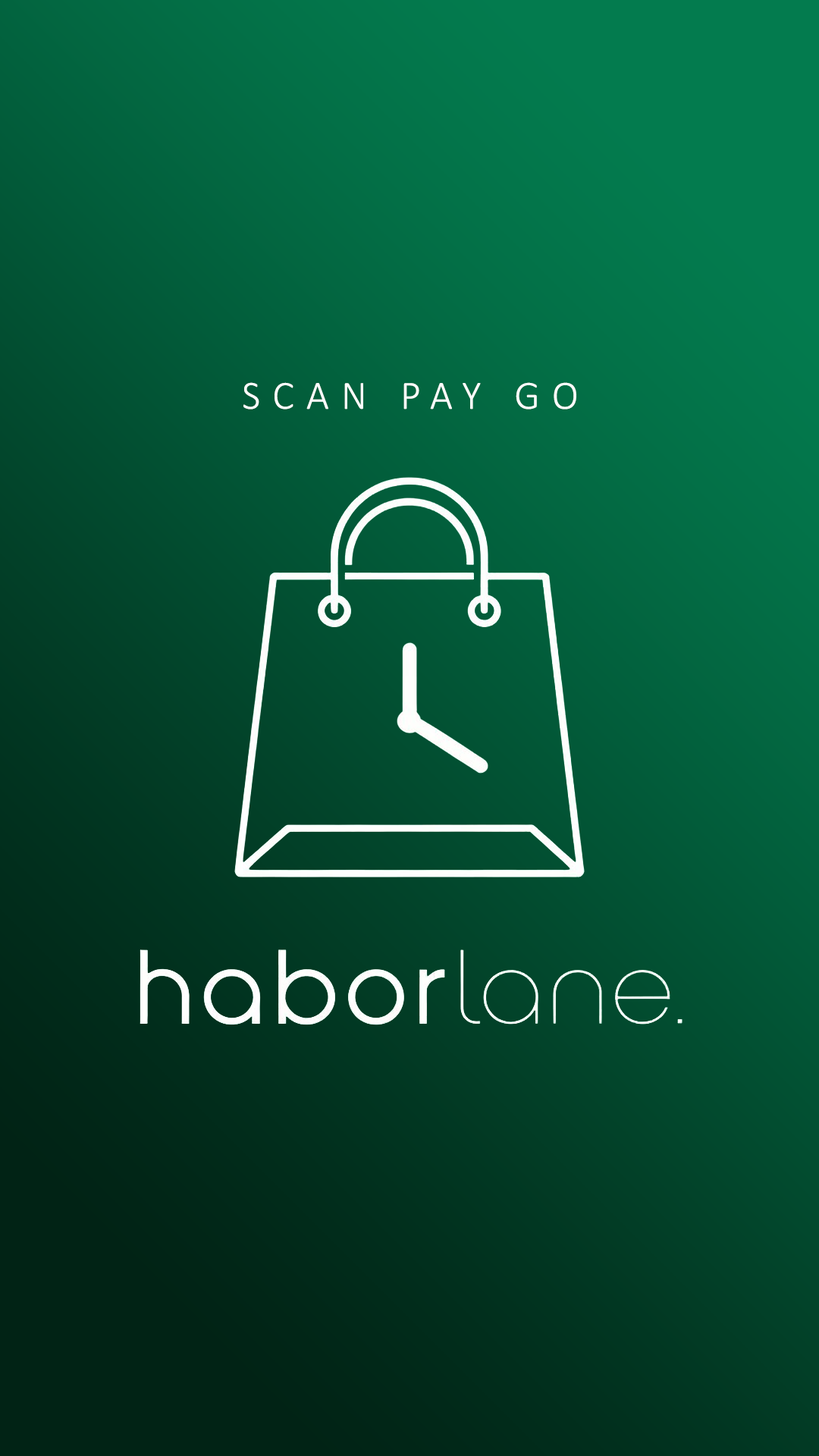
<style>
.page{position:relative;width:819px;height:1456px}
.page>*{position:absolute;margin:0}
.t1{font:40.4px "Calibri-Light";letter-spacing:0.3em;color:#fdfefd}
</style>
<div class="page">
<p class="t1" style="left:243px;top:382px;width:333px;height:27px">SCAN PAY GO</p>
</div>
